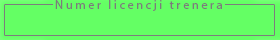
<style>
.page{position:relative;width:280px;height:40px;background:#64ff64}
.page>*{position:absolute;margin:0}
.t1{font:12.5px "MyriadPro-Regular";letter-spacing:0.2em;color:#7c7c7c}
</style>
<div class="page">
<p class="t1" style="left:55px;top:0px;width:167px;height:11px">Numer licencji trenera</p>
</div>
